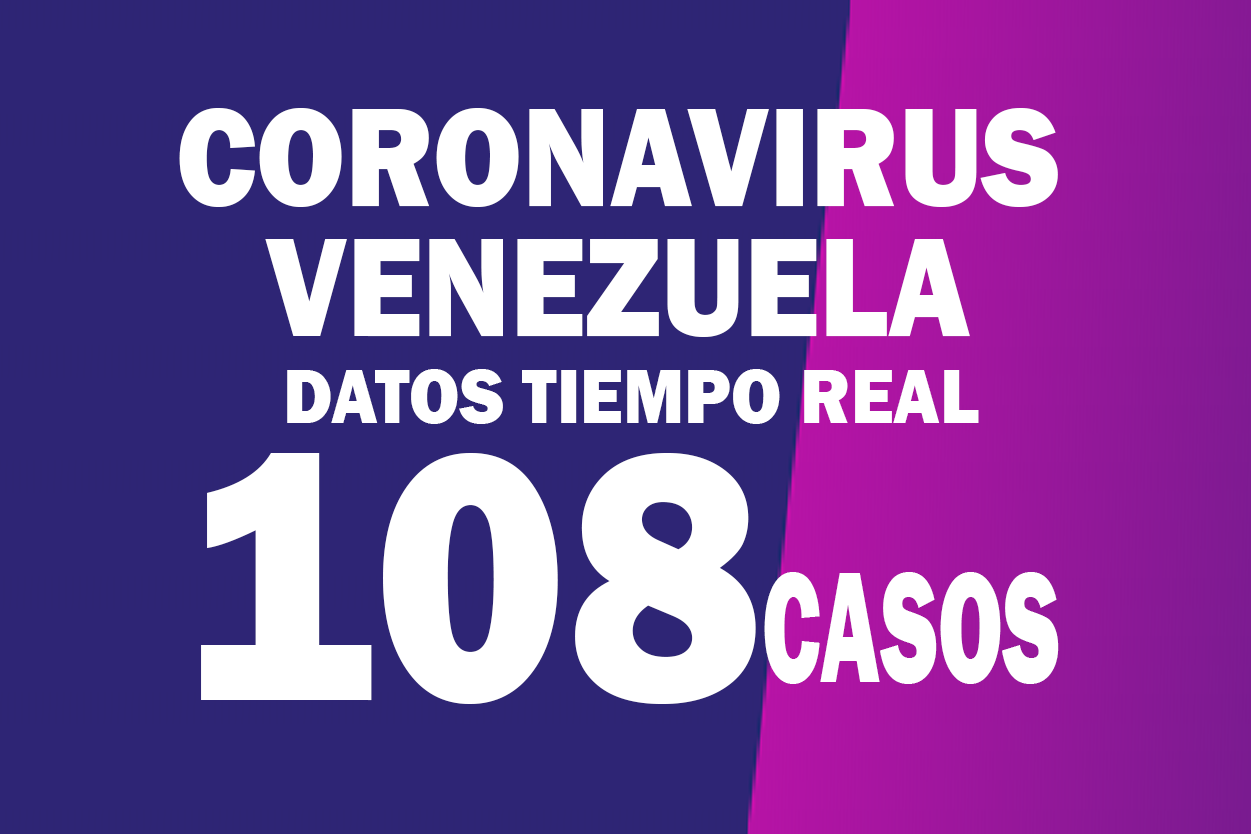
<style>
.page{position:relative;width:1251px;height:834px;background:#2e2575}
.page>*{position:absolute;margin:0}
.t1{font:145px/129.5px "FranklinGothic-Heavy";color:#ffffff;scale:0.89 1}
.t2{font:78.6px "FranklinGothic-Heavy";color:#ffffff;scale:0.93 1}
.t3{font:365px "FranklinGothic-Heavy";color:#ffffff;scale:0.91 1}
.t4{font:162.6px "FranklinGothic-Heavy";color:#ffffff;scale:0.58 1}
</style>
<div class="page">
<p class="t1" style="left:179px;top:108px;width:879px;height:229px;text-align:center">CORONAVIRUS<br>VENEZUELA</p>
<p class="t2" style="left:287px;top:369px;width:692px;height:55px">DATOS TIEMPO REAL</p>
<p class="t3" style="left:201px;top:453px;width:555px;height:251px">108</p>
<p class="t4" style="left:764px;top:572px;width:295px;height:112px">CASOS</p>
</div>
